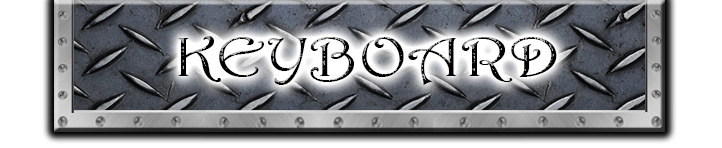
<style>
.page{position:relative;width:722px;height:148px;background:#ffffff}
.page>*{position:absolute;margin:0}
.t1{font:55.1px "Harrington";color:#000000;scale:1.31 1}
</style>
<div class="page">
<p class="t1" style="left:178px;top:36px;width:379px;height:49px">KEYBOARD</p>
</div>
